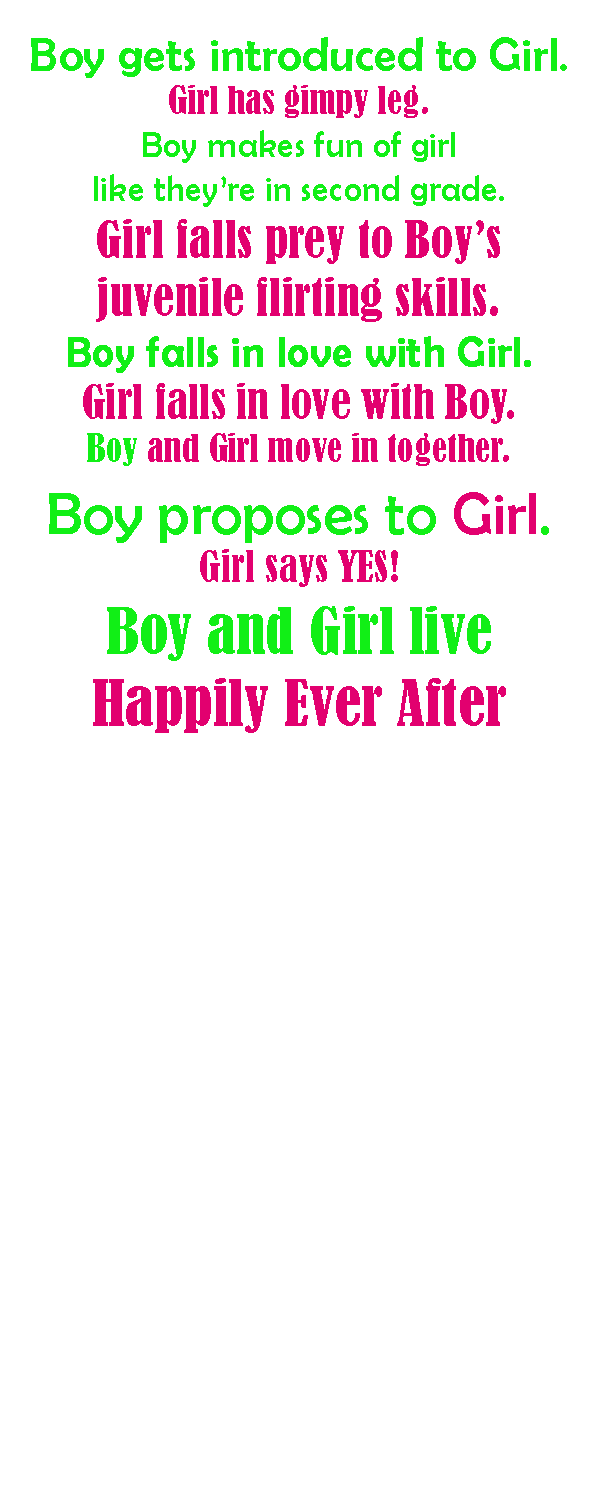
<style>
.page{position:relative;width:600px;height:1500px;background:#ffffff}
.page>*{position:absolute;margin:0}
.t1{font:36px "BerlinSansFB-Reg";color:#11ef16}
.t2{font:48px "BerlinSansFB-Reg";color:#11ef16}
.t3{font:36px "BernardMT-Condensed";color:#e2006f}
.t4{font:48px "BernardMT-Condensed";color:#e2006f}
.t5{font:42px "BerlinSansFB-Reg";color:#11ef16;font-weight:bold}
.t6{font:44px "BernardMT-Condensed";color:#e2006f}
.t7{font:36px "BernardMT-Condensed";color:#11ef16}
.t8{font:60px "BerlinSansFB-Reg";color:#11ef16}
.t9{font:60px "BerlinSansFB-Reg";color:#e2006f}
.t10{font:40px "BernardMT-Condensed";color:#e2006f}
.t11{font:60px "BernardMT-Condensed";color:#11ef16}
.t12{font:60px "BernardMT-Condensed";color:#e2006f}
</style>
<div class="page">
<p class="t1" style="left:31px;top:37px;width:536px;height:696px;text-align:center"><span class="t2">Boy gets introduced to Girl.<br></span><span class="t3">Girl has gimpy leg.<br></span>Boy makes fun of girl<br>like they’re in second grade.<br><span class="t4">Girl falls prey to Boy’s<br>juvenile flirting skills.<br></span><span class="t5">Boy falls in love with Girl.<br></span><span class="t6">Girl falls in love with Boy.<br></span><span class="t7">Boy</span><span class="t3"> and Girl move in together.<br></span><span class="t8">Boy proposes to </span><span class="t9">Girl</span><span class="t8">.<br></span><span class="t10">Girl says YES!<br></span><span class="t11">Boy and Girl live<br></span><span class="t12">Happily Ever After</span></p>
</div>
